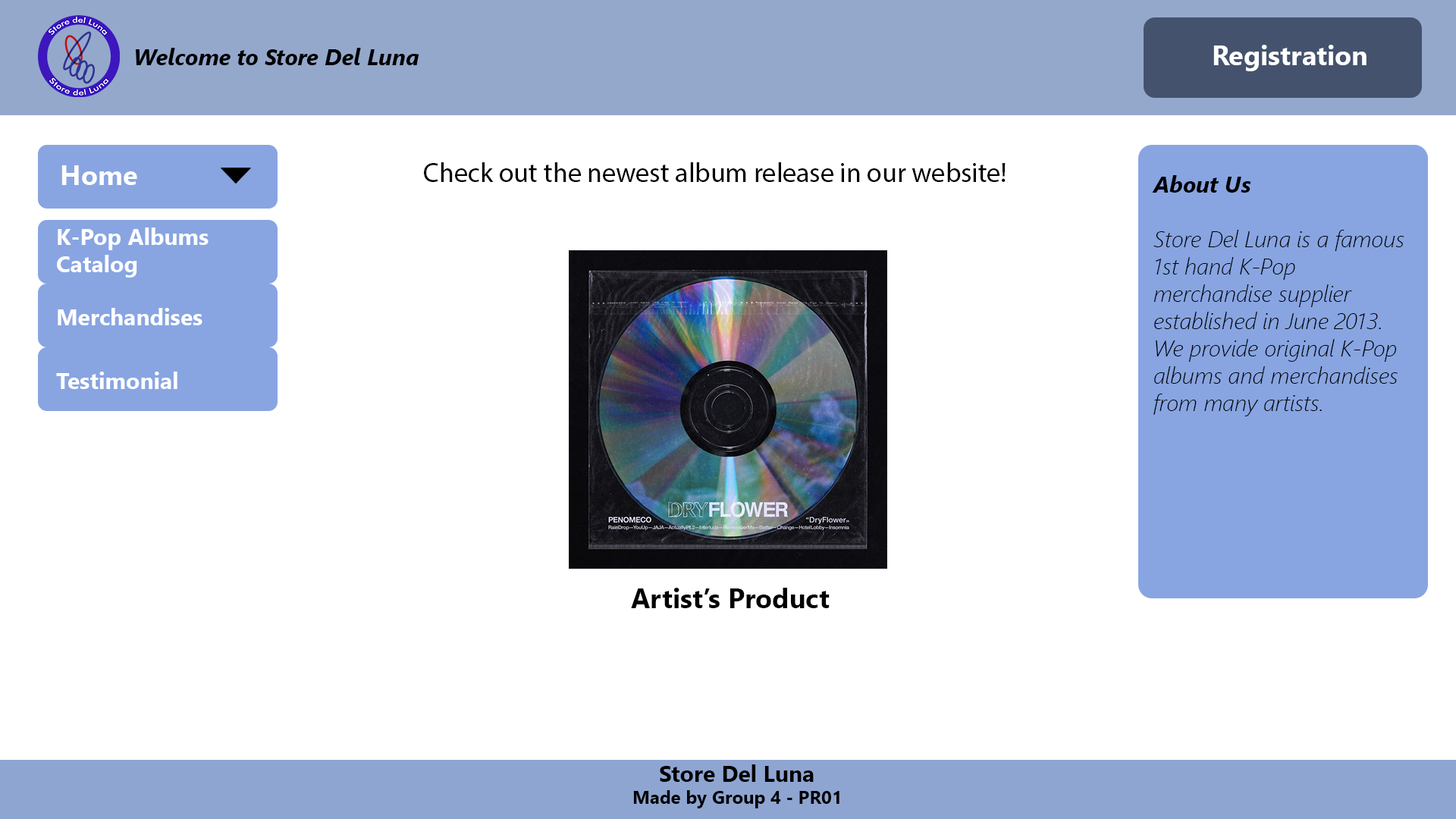
<style>
.page{position:relative;width:1456px;height:819px;background:#ffffff}
.page>*{position:absolute;margin:0}
.t1{font:22.7px "SegoeUI-BoldItalic";color:#000000}
.t2{font:27.3px "SegoeUI-Bold";color:#ffffff}
.t3{font:27.3px "MyriadPro-Regular";color:#000000}
.t4{font:22.7px "SegoeUI-LightItalic";color:#000000}
.t5{font:22.7px "SegoeUI-Bold";color:#ffffff}
.t6{font:27.3px "SegoeUI-Bold";color:#000000}
.t7{font:22.7px "SegoeUI-Bold";color:#000000}
.t8{font:18.2px "SegoeUI-Bold";color:#000000}
</style>
<div class="page">
<p class="t1" style="left:136px;top:48px;width:283px;height:17px">Welcome to Store Del Luna</p>
<p class="t2" style="left:1213px;top:45px;width:153px;height:26px">Registration</p>
<p class="t2" style="left:61px;top:165px;width:76px;height:20px">Home</p>
<p class="t3" style="left:424px;top:162px;width:582px;height:20px">Check out the newest album release in our website!</p>
<p class="t4" style="left:1152px;top:175px;width:252px;height:241px"><span class="t1">About Us<br></span><br>Store Del Luna is a famous 1st hand K-Pop merchandise supplier established in June 2013. We provide original K-Pop albums and merchandises from many artists.</p>
<p class="t5" style="left:57px;top:227px;width:152px;height:51px">K-Pop Albums<br>Catalog</p>
<p class="t5" style="left:58px;top:308px;width:144px;height:17px">Merchandises</p>
<p class="t5" style="left:56px;top:372px;width:121px;height:17px">Testimonial</p>
<p class="t6" style="left:631px;top:588px;width:199px;height:20px">Artist’s Product</p>
<p class="t7" style="left:660px;top:764px;width:154px;height:18px">Store Del Luna</p>
<p class="t8" style="left:633px;top:790px;width:206px;height:18px">Made by Group 4 - PR01</p>
</div>
